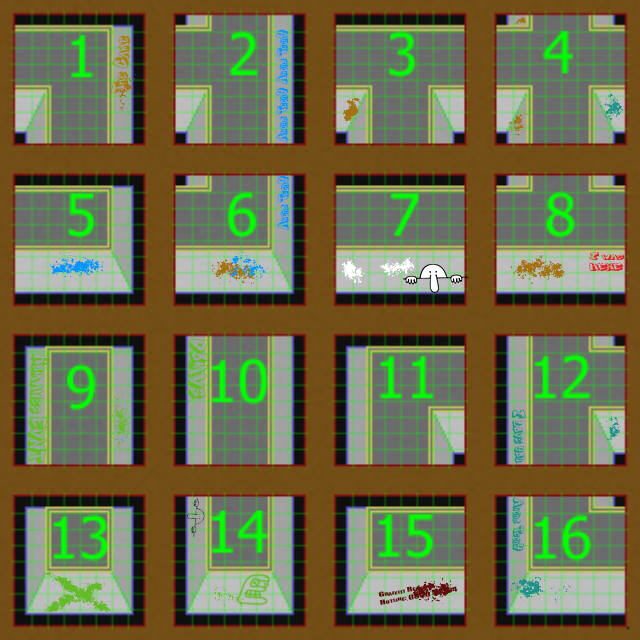
<style>
.page{position:relative;width:640px;height:640px}
.page>*{position:absolute;margin:0}
.t1{font:13.7px "DOCALLISME-ON-STREET-Regular";color:#0096ff;font-variant:small-caps}
.t2{font:19.2px "DOCALLISME-ON-STREET-Regular";color:#a4830f;font-variant:small-caps}
.t3{font:9.3px "DOCALLISME-ON-STREET-Regular";color:#e22121;font-variant:small-caps;scale:2.01 1}
.t4{font:23.3px "DOCALLISME-ON-STREET-Regular";color:#63bb28;font-variant:small-caps}
.t5{font:17.1px "DOCALLISME-ON-STREET-Regular";color:#1d928b;font-variant:small-caps}
.t6{font:13.7px "DOCALLISME-ON-STREET-Regular";color:#1d928b;font-variant:small-caps}
.t7{font:6.1px "Impact";color:#600c0c;font-variant:small-caps;scale:1.71 1}
</style>
<div class="page">
<p class="t1" style="left:276px;top:29px;width:12px;height:56px;rotate:-89deg">Archo TechY</p>
<p class="t2" style="left:111px;top:35px;width:20px;height:59px;rotate:-87deg">The Game</p>
<p class="t1" style="left:276px;top:87px;width:12px;height:56px;rotate:-89deg">Archo TechY</p>
<p class="t1" style="left:277px;top:175px;width:12px;height:56px;rotate:-89deg">Archo TechY</p>
<p class="t3" style="left:589px;top:252px;width:36px;height:19px">I was<br>HERE</p>
<p class="t4" style="left:186px;top:338px;width:23px;height:62px;rotate:93deg">DOMVS</p>
<p class="t4" style="left:26px;top:353px;width:25px;height:111px;rotate:93deg">Romanes EVNT</p>
<p class="t5" style="left:511px;top:409px;width:15px;height:55px;rotate:86deg">I love you</p>
<p class="t6" style="left:512px;top:497px;width:13px;height:55px;rotate:91deg">Archo TechY</p>
<p class="t7" style="left:378px;top:584px;width:80px;height:21px;rotate:-10deg">Graffiti Removal<br>Hotline: 0800 15464</p>
</div>
